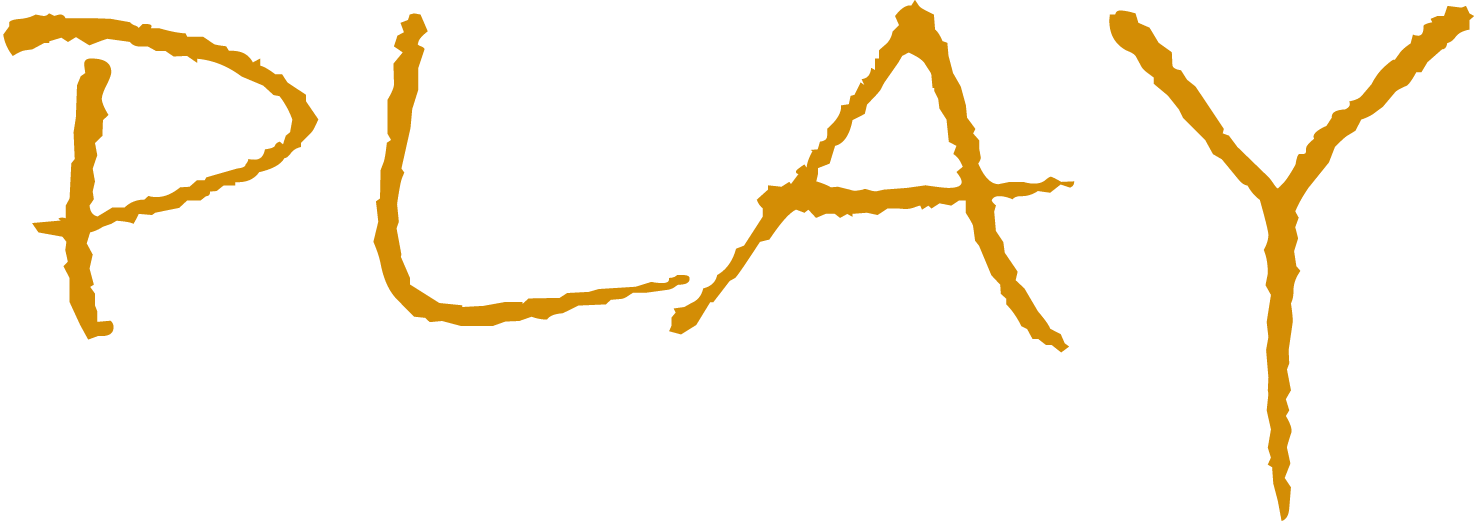
<style>
.page{position:relative;width:1475px;height:521px;background:#ffffff}
.page>*{position:absolute;margin:0}
.t1{font:585px "BradleyHandITC";color:#d38d05}
</style>
<div class="page">
<p class="t1" style="left:3px;top:0px;width:1471px;height:521px">PLAY</p>
</div>
